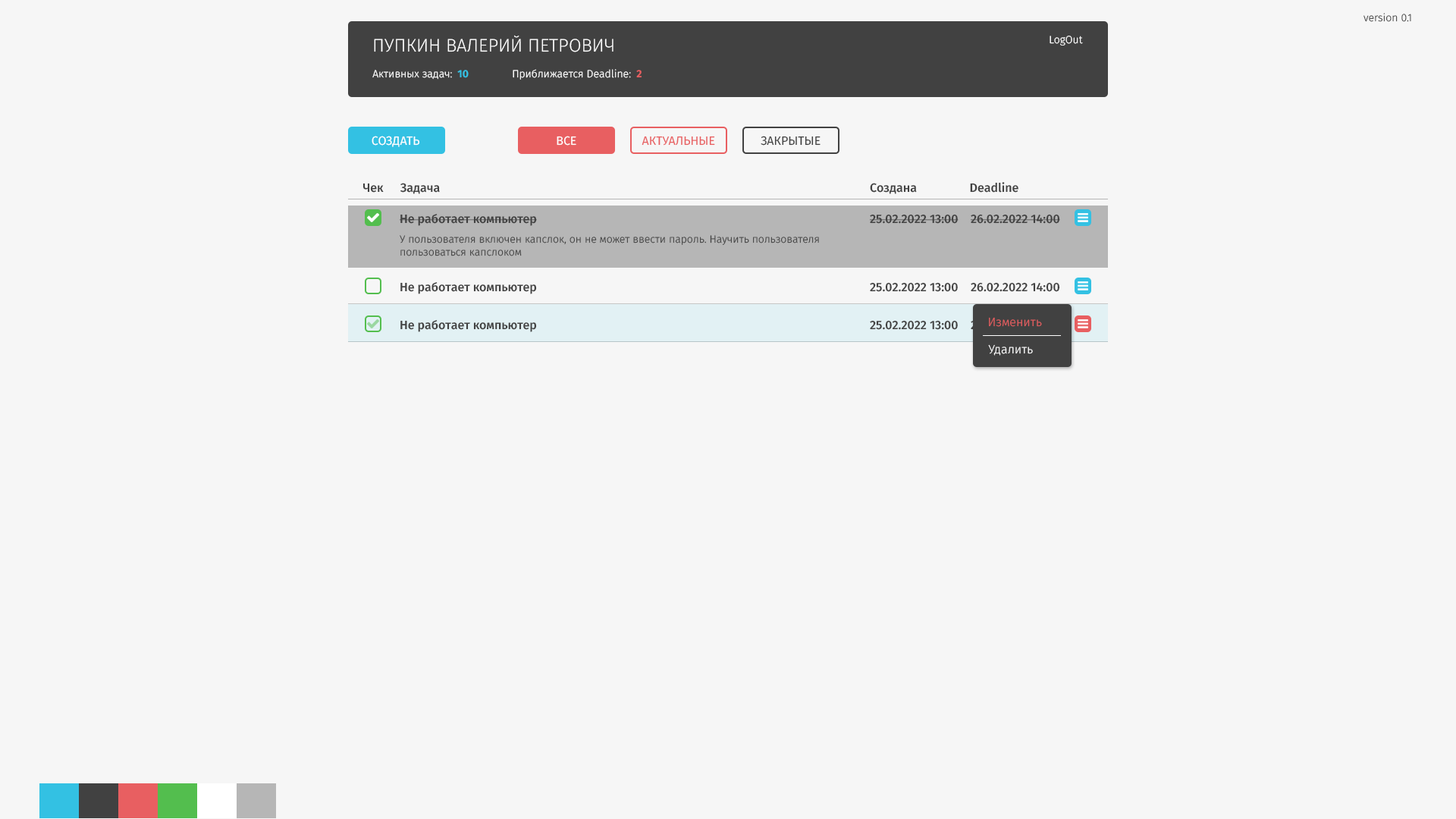
<style>
.page{position:relative;width:1456px;height:819px;background:#f6f6f6}
.page>*{position:absolute;margin:0}
.t1{font:10.6px "FiraSans-Light";color:#414141}
.t2{font:18.2px "FiraSans-Light";color:#ffffff;text-transform:uppercase}
.t3{font:10.6px "FiraSans-Light";color:#ffffff}
.t4{font:10.6px "FiraSans-Bold";color:#33c1e3}
.t5{font:10.6px "FiraSans-Bold";color:#e85f61}
.t6{font:12.1px "FiraSans-Regular";color:#ffffff;text-transform:uppercase}
.t7{font:12.1px "FiraSans-Regular";color:#e85f61;text-transform:uppercase}
.t8{font:12.1px "FiraSans-Regular";color:#414141;text-transform:uppercase}
.t9{font:12.1px "FiraSans-Medium";color:#414141}
.t10{font:12.1px "FiraSans-Light";color:#e85f61}
.t11{font:12.1px "FiraSans-Light";color:#ffffff}
</style>
<div class="page">
<p class="t1" style="left:1363px;top:13px;width:48px;height:9px">version 0.1</p>
<p class="t2" style="left:374px;top:35px;width:239px;height:17px">Пупкин Валерий петрович</p>
<p class="t3" style="left:1050px;top:36px;width:33px;height:9px">LogOut</p>
<p class="t3" style="left:372px;top:70px;width:80px;height:10px">Активных задач:</p>
<p class="t4" style="left:457px;top:70px;width:12px;height:8px">10</p>
<p class="t3" style="left:513px;top:69px;width:118px;height:11px">Приближается Deadline:</p>
<p class="t5" style="left:636px;top:70px;width:6px;height:7px">2</p>
<p class="t6" style="left:372px;top:136px;width:48px;height:11px">Создать</p>
<p class="t6" style="left:557px;top:136px;width:19px;height:10px">Все</p>
<p class="t7" style="left:642px;top:136px;width:73px;height:10px">Актуальные</p>
<p class="t8" style="left:761px;top:136px;width:60px;height:10px">Закрытые</p>
<p class="t9" style="left:362px;top:183px;width:22px;height:10px">Чек</p>
<p class="t9" style="left:400px;top:183px;width:40px;height:11px">Задача</p>
<p class="t9" style="left:870px;top:183px;width:47px;height:11px">Создана</p>
<p class="t9" style="left:970px;top:182px;width:48px;height:11px">Deadline</p>
<p class="t9" style="left:400px;top:214px;width:137px;height:12px">Не работает компьютер</p>
<p class="t9" style="left:870px;top:214px;width:89px;height:10px">25.02.2022 13:00</p>
<p class="t9" style="left:971px;top:214px;width:89px;height:10px">26.02.2022 14:00</p>
<p class="t1" style="left:400px;top:235px;width:419px;height:21px">У пользователя включен капслок, он не может ввести пароль. Научить пользователя пользоваться капслоком</p>
<p class="t9" style="left:400px;top:282px;width:137px;height:12px">Не работает компьютер</p>
<p class="t9" style="left:870px;top:282px;width:88px;height:10px">25.02.2022 13:00</p>
<p class="t9" style="left:971px;top:282px;width:89px;height:10px">26.02.2022 14:00</p>
<p class="t10" style="left:989px;top:317px;width:53px;height:10px">Изменить</p>
<p class="t9" style="left:400px;top:320px;width:137px;height:12px">Не работает компьютер</p>
<p class="t9" style="left:870px;top:320px;width:88px;height:10px">25.02.2022 13:00</p>
<p class="t11" style="left:988px;top:344px;width:45px;height:12px">Удалить</p>
</div>
